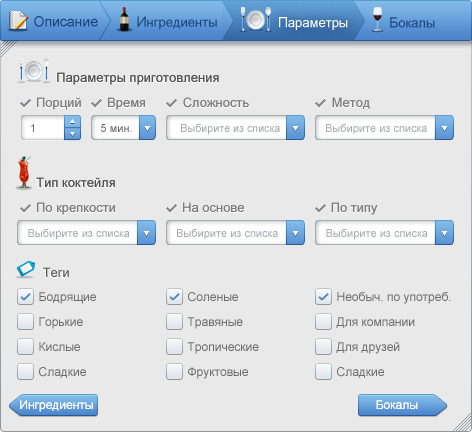
<style>
.page{position:relative;width:472px;height:432px;background:#e9e9e9}
.page>*{position:absolute;margin:0}
.t1{font:14px "ArialMT";color:#1b4680;font-weight:bold}
.t2{font:13px "ArialMT";color:#1b4680;font-weight:bold}
.t3{font:13px "ArialMT";color:#ffffff;font-weight:bold}
.t4{font:14px "ArialMT";color:#ffffff;font-weight:bold}
.t5{font:13px "ArialMT";color:#505050}
.t6{font:13px "ArialMT"}
.t7{font:13px "ArialMT";color:#7b7b7b}
.t8{font:11px "ArialMT";color:#6b6b6b}
.t9{font:11px "ArialMT";color:#a6acb2}
.t10{font:12px "ArialMT";color:#6b6b6b}
.t11{font:12px "ArialMT";color:#ffffff}
</style>
<div class="page">
<p class="t1" style="left:34px;top:16px;width:64px;height:11px">Описание</p>
<p class="t2" style="left:137px;top:16px;width:80px;height:14px"><span class="t1">И</span>нгредиенты</p>
<p class="t3" style="left:279px;top:17px;width:69px;height:13px"><span class="t4">П</span>араметры</p>
<p class="t2" style="left:390px;top:17px;width:45px;height:11px"><span class="t1">Б</span>окалы</p>
<p class="t5" style="left:57px;top:72px;width:162px;height:13px">Параметры приготовления</p>
<p class="t6" style="left:37px;top:98px;width:44px;height:13px">Порций</p>
<p class="t7" style="left:37px;top:97px;width:44px;height:13px">Порций</p>
<p class="t6" style="left:108px;top:98px;width:37px;height:13px">Время</p>
<p class="t7" style="left:108px;top:97px;width:37px;height:13px">Время</p>
<p class="t6" style="left:183px;top:98px;width:66px;height:11px">Сложность</p>
<p class="t7" style="left:183px;top:97px;width:66px;height:11px">Сложность</p>
<p class="t6" style="left:332px;top:98px;width:38px;height:12px">Метод</p>
<p class="t7" style="left:332px;top:97px;width:38px;height:12px">Метод</p>
<p class="t8" style="left:31px;top:124px;width:3px;height:8px">1</p>
<p class="t8" style="left:101px;top:124px;width:31px;height:8px">5 мин.</p>
<p class="t9" style="left:181px;top:123px;width:99px;height:12px">Выбирите из списка</p>
<p class="t9" style="left:326px;top:123px;width:101px;height:12px">Выбирите из списка</p>
<p class="t5" style="left:36px;top:177px;width:79px;height:10px">Тип коктейля</p>
<p class="t6" style="left:37px;top:203px;width:78px;height:13px">По крепкости</p>
<p class="t7" style="left:37px;top:202px;width:78px;height:13px">По крепкости</p>
<p class="t7" style="left:183px;top:202px;width:61px;height:10px">На основе</p>
<p class="t6" style="left:331px;top:203px;width:47px;height:13px">По типу</p>
<p class="t7" style="left:331px;top:202px;width:47px;height:13px">По типу</p>
<p class="t9" style="left:28px;top:228px;width:102px;height:12px">Выбирите из списка</p>
<p class="t9" style="left:177px;top:228px;width:101px;height:12px">Выбирите из списка</p>
<p class="t9" style="left:326px;top:228px;width:102px;height:12px">Выбирите из списка</p>
<p class="t5" style="left:43px;top:267px;width:26px;height:10px">Теги</p>
<p class="t10" style="left:39px;top:292px;width:57px;height:12px">Бодрящие</p>
<p class="t10" style="left:188px;top:292px;width:50px;height:10px">Соленые</p>
<p class="t10" style="left:337px;top:292px;width:114px;height:12px">Необыч. по употреб.</p>
<p class="t10" style="left:39px;top:317px;width:44px;height:12px">Горькие</p>
<p class="t10" style="left:187px;top:317px;width:56px;height:12px">Травяные</p>
<p class="t10" style="left:336px;top:317px;width:79px;height:11px">Для компании</p>
<p class="t10" style="left:39px;top:342px;width:41px;height:9px">Кислые</p>
<p class="t10" style="left:187px;top:342px;width:72px;height:12px">Тропические</p>
<p class="t10" style="left:336px;top:342px;width:64px;height:12px">Для друзей</p>
<p class="t10" style="left:39px;top:367px;width:47px;height:11px">Сладкие</p>
<p class="t10" style="left:188px;top:367px;width:60px;height:12px">Фруктовые</p>
<p class="t10" style="left:337px;top:367px;width:47px;height:11px">Сладкие</p>
<p class="t11" style="left:20px;top:400px;width:73px;height:12px">Ингредиенты</p>
<p class="t11" style="left:376px;top:400px;width:42px;height:9px">Бокалы</p>
</div>
